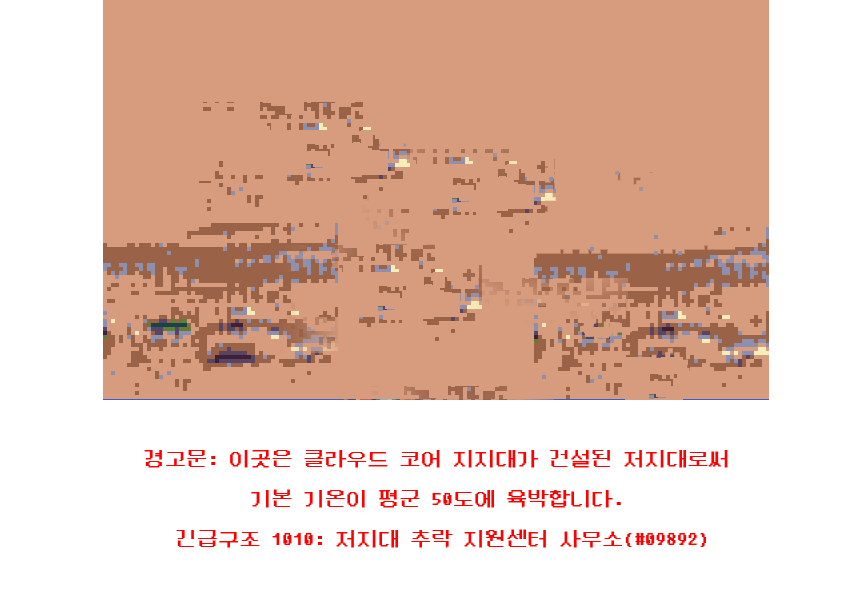
<style>
.page{position:relative;width:855px;height:603px;background:#ffffff}
.page>*{position:absolute;margin:0}
.t1{font:21.3px/20px "DungGeunMo";color:#ff0000}
.t2{font:21.3px/20px "DungGeunMo";color:#ffffff}
</style>
<div class="page">
<p class="t1" style="left:144px;top:450px;width:584px;height:98px;text-align:center"><span class="t2"><br></span>경고문: 이곳은 클라우드 코어 지지대가 건설된 저지대로써 <br><br>기본 기온이 평군 50도에 육박합니다. <br><br>긴급구조 1010: 저지대 추락 지원센터 사무소(#09892)</p>
</div>
